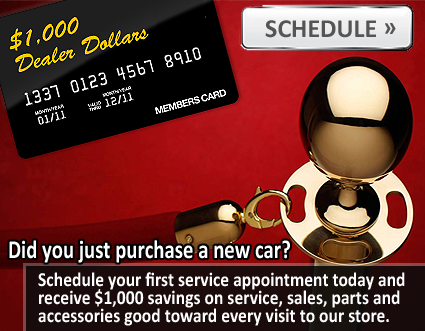
<style>
.page{position:relative;width:425px;height:331px}
.page>*{position:absolute;margin:0}
.t1{font:26px "Calibri-Bold";color:#555555}
.t2{font:26px "Calibri-Bold";color:#ffffff;scale:0.8 1}
.t3{font:20px/18px "Calibri-Bold";color:#ffffff;scale:0.88 1}
</style>
<div class="page">
<p class="t1" style="left:265px;top:20px;width:131px;height:18px">SCHEDULE »</p>
<p class="t2" style="left:9px;top:240px;width:281px;height:23px">Did you just purchase a new car?</p>
<p class="t3" style="left:38px;top:272px;width:367px;height:54px">Schedule your first service appointment today and<br>receive $1,000 savings on service, sales, parts and <br>accessories good toward every visit to our store.</p>
</div>
